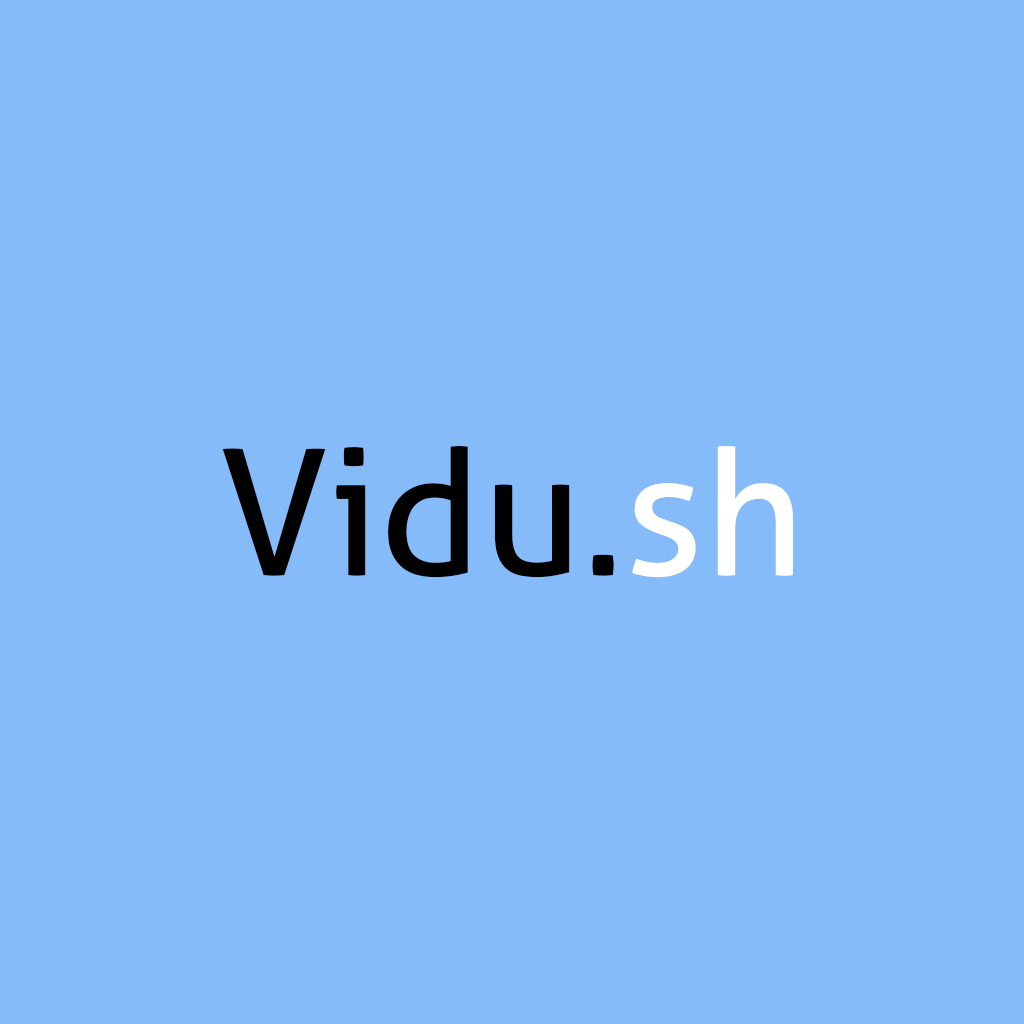
<style>
.page{position:relative;width:1024px;height:1024px;background:#86bbfa}
.page>*{position:absolute;margin:0}
.t1{font:300px "Aller";color:#000000}
.t2{font:300px "Aller";color:#ffffff}
</style>
<div class="page">
<p class="t1" style="left:222px;top:446px;width:571px;height:132px">Vidu.<span class="t2">sh</span></p>
</div>
